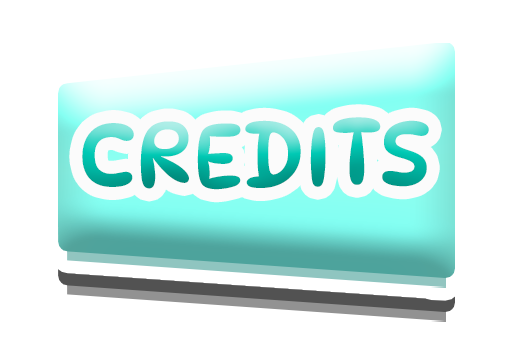
<style>
.page{position:relative;width:516px;height:358px;background:#ffffff}
.page>*{position:absolute;margin:0}
.t1{font:88.6px "DynaPuff-Regular"}
</style>
<div class="page">
<p class="t1" style="left:82px;top:117px;width:347px;height:73px">CREDITS</p>
</div>
